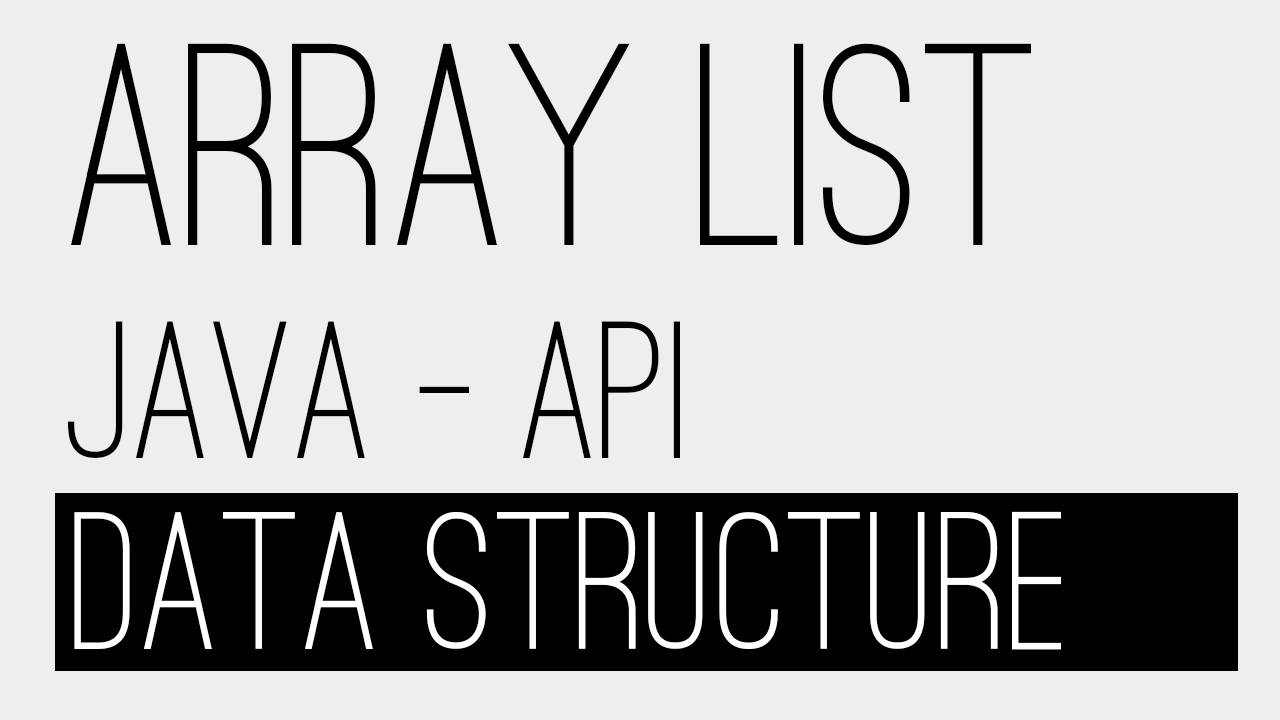
<style>
.page{position:relative;width:1280px;height:720px;background:#eeeeee}
.page>*{position:absolute;margin:0}
.t1{font:298.6px/213.3px "OstrichSans-Medium";color:#000000}
.t2{font:202.6px/213.3px "OstrichSans-Medium";color:#000000}
.t3{font:203px "OstrichSans-Medium";color:#ffffff}
</style>
<div class="page">
<p class="t1" style="left:67px;top:43px;width:964px;height:415px">Array LIST <br><span class="t2">Java - API</span></p>
<p class="t3" style="left:74px;top:511px;width:987px;height:139px">DATA STRUCTURE</p>
</div>
